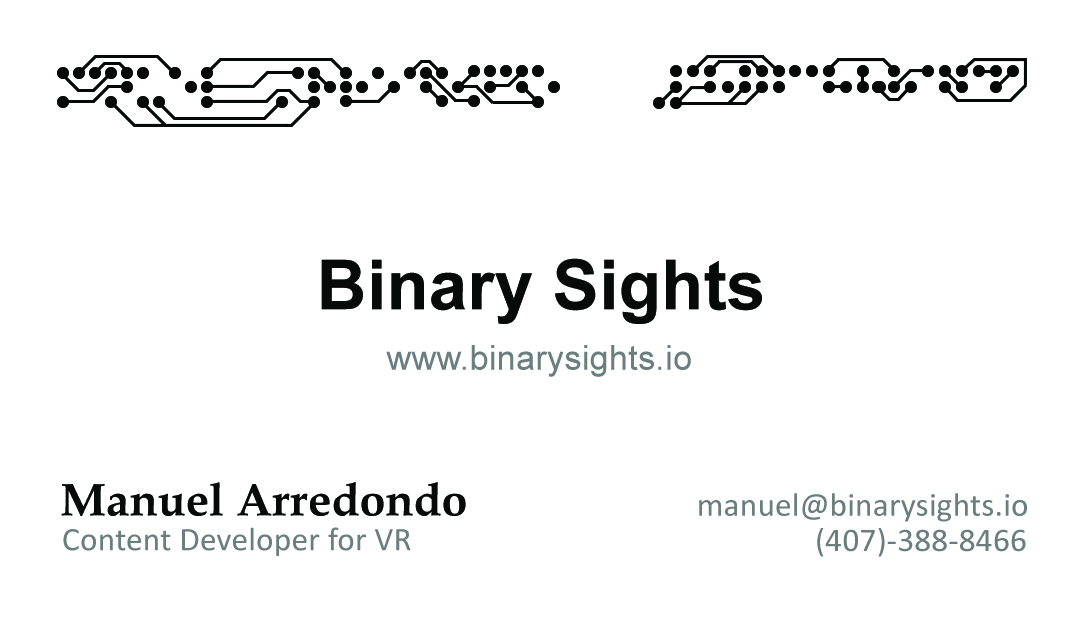
<style>
.page{position:relative;width:1085px;height:635px;background:#ffffff}
.page>*{position:absolute;margin:0}
.t1{font:68.9px "Arial-BoldMT";letter-spacing:0.005em;color:#080a0a}
.t2{font:34.4px "ArialMT";letter-spacing:0.005em;color:#6b7e7f}
.t3{font:45.8px "BookAntiqua-Bold";letter-spacing:0.005em;color:#080a0a}
.t4{font:33.3px "Calibri";letter-spacing:0.005em;color:#6b7e7f}
</style>
<div class="page">
<p class="t1" style="left:321px;top:258px;width:441px;height:66px">Binary Sights</p>
<p class="t2" style="left:386px;top:345px;width:305px;height:32px">www.binarysights.io</p>
<p class="t3" style="left:61px;top:482px;width:405px;height:34px">Manuel Arredondo</p>
<p class="t4" style="left:699px;top:493px;width:328px;height:29px">manuel@binarysights.io</p>
<p class="t4" style="left:63px;top:527px;width:348px;height:29px">Content Developer for VR</p>
<p class="t4" style="left:817px;top:528px;width:209px;height:29px">(407)-388-8466</p>
</div>
